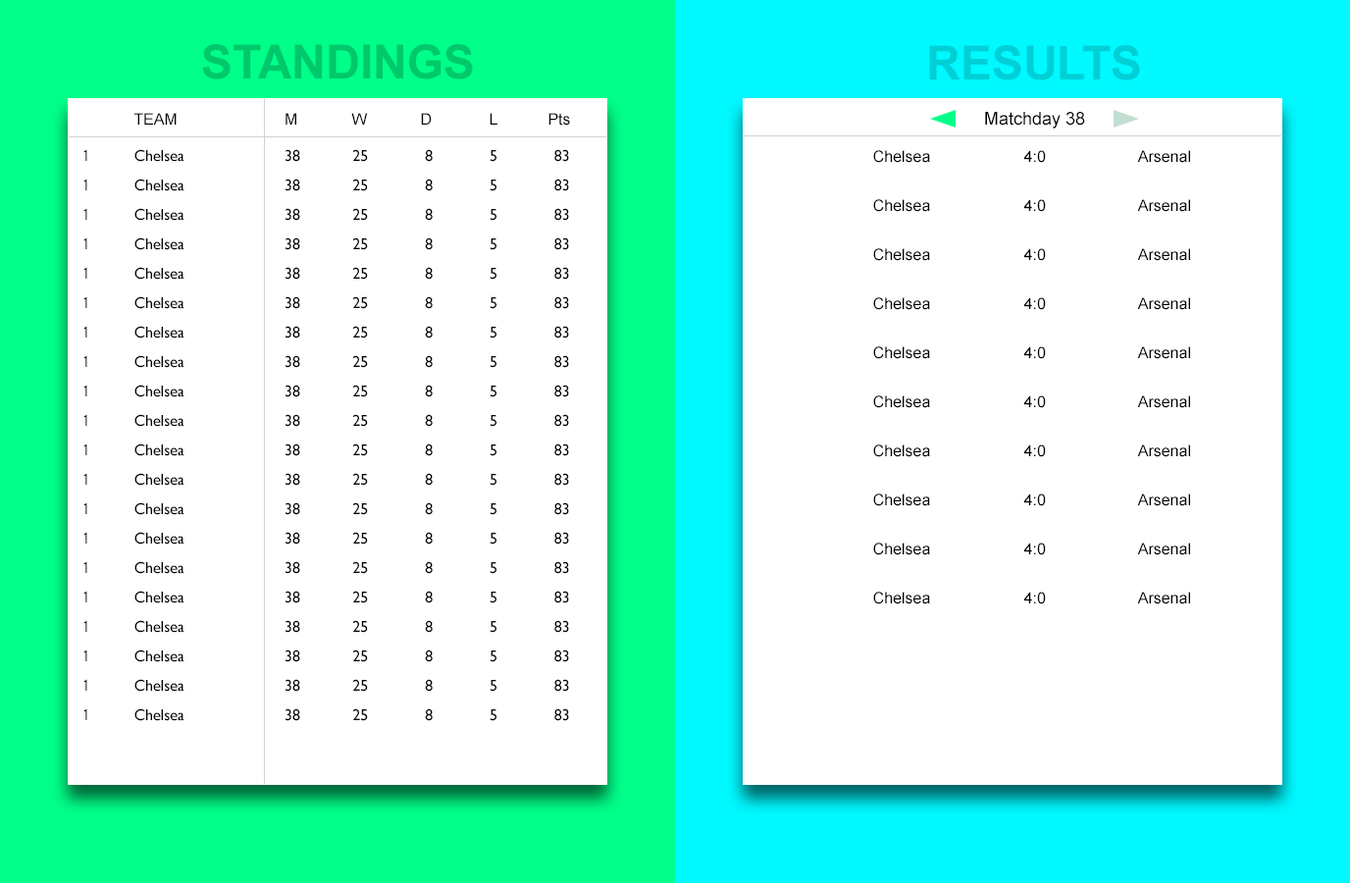
<style>
.page{position:relative;width:1350px;height:883px;background:#ffffff}
.page>*{position:absolute;margin:0}
.t1{font:47.1px "Arial-BoldMT";color:#00c86b}
.t2{font:47.1px "Arial-BoldMT";color:#00d0d6}
.t3{font:15.7px "ArialMT";color:#000000}
.t4{font:17.7px "ArialMT";color:#000000}
.t5{font:15.7px "GillSans";color:#000000}
.t6{font:15.7px "BebasNeueRegular";color:#000000}
</style>
<div class="page">
<p class="t1" style="left:202px;top:44px;width:271px;height:35px">STANDINGS</p>
<p class="t2" style="left:929px;top:45px;width:211px;height:35px">RESULTS</p>
<p class="t3" style="left:133px;top:113px;width:44px;height:12px">TEAM</p>
<p class="t3" style="left:286px;top:113px;width:10px;height:12px">M</p>
<p class="t3" style="left:351px;top:113px;width:17px;height:12px">W</p>
<p class="t3" style="left:421px;top:113px;width:11px;height:12px">D</p>
<p class="t3" style="left:490px;top:113px;width:8px;height:12px">L</p>
<p class="t3" style="left:549px;top:113px;width:21px;height:13px">Pts</p>
<p class="t4" style="left:985px;top:112px;width:100px;height:17px">Matchday 38</p>
<p class="t5" style="left:83px;top:149px;width:486px;height:13px"><span class="t6">1                   </span>Chelsea                       38            25             8             5             83</p>
<p class="t3" style="left:873px;top:150px;width:57px;height:13px">Chelsea</p>
<p class="t3" style="left:1023px;top:150px;width:23px;height:13px">4:0</p>
<p class="t3" style="left:1137px;top:150px;width:53px;height:13px">Arsenal</p>
<p class="t5" style="left:83px;top:179px;width:486px;height:12px"><span class="t6">1                   </span>Chelsea                       38            25             8             5             83</p>
<p class="t5" style="left:83px;top:208px;width:486px;height:13px"><span class="t6">1                   </span>Chelsea                       38            25             8             5             83</p>
<p class="t3" style="left:873px;top:199px;width:57px;height:13px">Chelsea</p>
<p class="t3" style="left:1023px;top:199px;width:23px;height:13px">4:0</p>
<p class="t3" style="left:1137px;top:199px;width:53px;height:13px">Arsenal</p>
<p class="t5" style="left:83px;top:237px;width:486px;height:13px"><span class="t6">1                   </span>Chelsea                       38            25             8             5             83</p>
<p class="t3" style="left:873px;top:248px;width:57px;height:13px">Chelsea</p>
<p class="t3" style="left:1023px;top:248px;width:23px;height:13px">4:0</p>
<p class="t3" style="left:1137px;top:248px;width:53px;height:13px">Arsenal</p>
<p class="t5" style="left:83px;top:267px;width:486px;height:13px"><span class="t6">1                   </span>Chelsea                       38            25             8             5             83</p>
<p class="t5" style="left:83px;top:296px;width:486px;height:13px"><span class="t6">1                   </span>Chelsea                       38            25             8             5             83</p>
<p class="t3" style="left:873px;top:297px;width:57px;height:13px">Chelsea</p>
<p class="t3" style="left:1023px;top:297px;width:23px;height:13px">4:0</p>
<p class="t3" style="left:1137px;top:297px;width:53px;height:13px">Arsenal</p>
<p class="t5" style="left:83px;top:326px;width:486px;height:13px"><span class="t6">1                   </span>Chelsea                       38            25             8             5             83</p>
<p class="t3" style="left:873px;top:346px;width:57px;height:13px">Chelsea</p>
<p class="t3" style="left:1023px;top:346px;width:23px;height:13px">4:0</p>
<p class="t3" style="left:1137px;top:346px;width:53px;height:13px">Arsenal</p>
<p class="t5" style="left:83px;top:355px;width:486px;height:13px"><span class="t6">1                   </span>Chelsea                       38            25             8             5             83</p>
<p class="t5" style="left:83px;top:385px;width:486px;height:12px"><span class="t6">1                   </span>Chelsea                       38            25             8             5             83</p>
<p class="t3" style="left:873px;top:395px;width:57px;height:13px">Chelsea</p>
<p class="t3" style="left:1023px;top:395px;width:23px;height:13px">4:0</p>
<p class="t3" style="left:1137px;top:395px;width:53px;height:13px">Arsenal</p>
<p class="t5" style="left:83px;top:414px;width:486px;height:13px"><span class="t6">1                   </span>Chelsea                       38            25             8             5             83</p>
<p class="t5" style="left:83px;top:444px;width:486px;height:12px"><span class="t6">1                   </span>Chelsea                       38            25             8             5             83</p>
<p class="t3" style="left:873px;top:445px;width:57px;height:12px">Chelsea</p>
<p class="t3" style="left:1023px;top:445px;width:23px;height:12px">4:0</p>
<p class="t3" style="left:1137px;top:445px;width:53px;height:12px">Arsenal</p>
<p class="t5" style="left:83px;top:473px;width:486px;height:13px"><span class="t6">1                   </span>Chelsea                       38            25             8             5             83</p>
<p class="t3" style="left:873px;top:494px;width:57px;height:12px">Chelsea</p>
<p class="t3" style="left:1023px;top:494px;width:23px;height:12px">4:0</p>
<p class="t3" style="left:1137px;top:494px;width:53px;height:12px">Arsenal</p>
<p class="t5" style="left:83px;top:502px;width:486px;height:13px"><span class="t6">1                   </span>Chelsea                       38            25             8             5             83</p>
<p class="t5" style="left:83px;top:532px;width:486px;height:13px"><span class="t6">1                   </span>Chelsea                       38            25             8             5             83</p>
<p class="t3" style="left:873px;top:543px;width:57px;height:12px">Chelsea</p>
<p class="t3" style="left:1023px;top:543px;width:23px;height:12px">4:0</p>
<p class="t3" style="left:1137px;top:543px;width:53px;height:12px">Arsenal</p>
<p class="t5" style="left:83px;top:561px;width:486px;height:13px"><span class="t6">1                   </span>Chelsea                       38            25             8             5             83</p>
<p class="t5" style="left:83px;top:591px;width:486px;height:12px"><span class="t6">1                   </span>Chelsea                       38            25             8             5             83</p>
<p class="t3" style="left:873px;top:592px;width:57px;height:12px">Chelsea</p>
<p class="t3" style="left:1023px;top:592px;width:23px;height:12px">4:0</p>
<p class="t3" style="left:1137px;top:592px;width:53px;height:12px">Arsenal</p>
<p class="t5" style="left:83px;top:620px;width:486px;height:13px"><span class="t6">1                   </span>Chelsea                       38            25             8             5             83</p>
<p class="t5" style="left:83px;top:650px;width:486px;height:12px"><span class="t6">1                   </span>Chelsea                       38            25             8             5             83</p>
<p class="t5" style="left:83px;top:679px;width:486px;height:13px"><span class="t6">1                   </span>Chelsea                       38            25             8             5             83</p>
<p class="t5" style="left:83px;top:708px;width:486px;height:13px"><span class="t6">1                   </span>Chelsea                       38            25             8             5             83</p>
</div>
